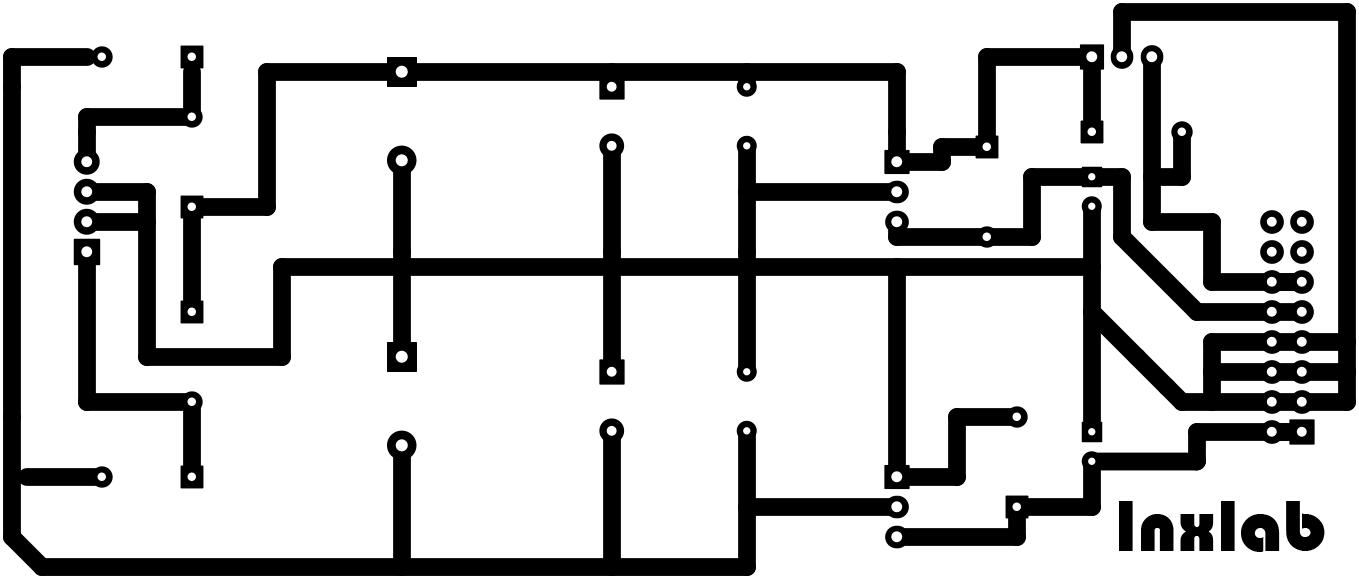
<style>
.page{position:relative;width:1359px;height:579px;background:#ffffff}
.page>*{position:absolute;margin:0}
.t1{font:75px "Bauhaus93";color:#000000}
</style>
<div class="page">
<p class="t1" style="left:1119px;top:501px;width:206px;height:51px">lnxlab</p>
</div>
